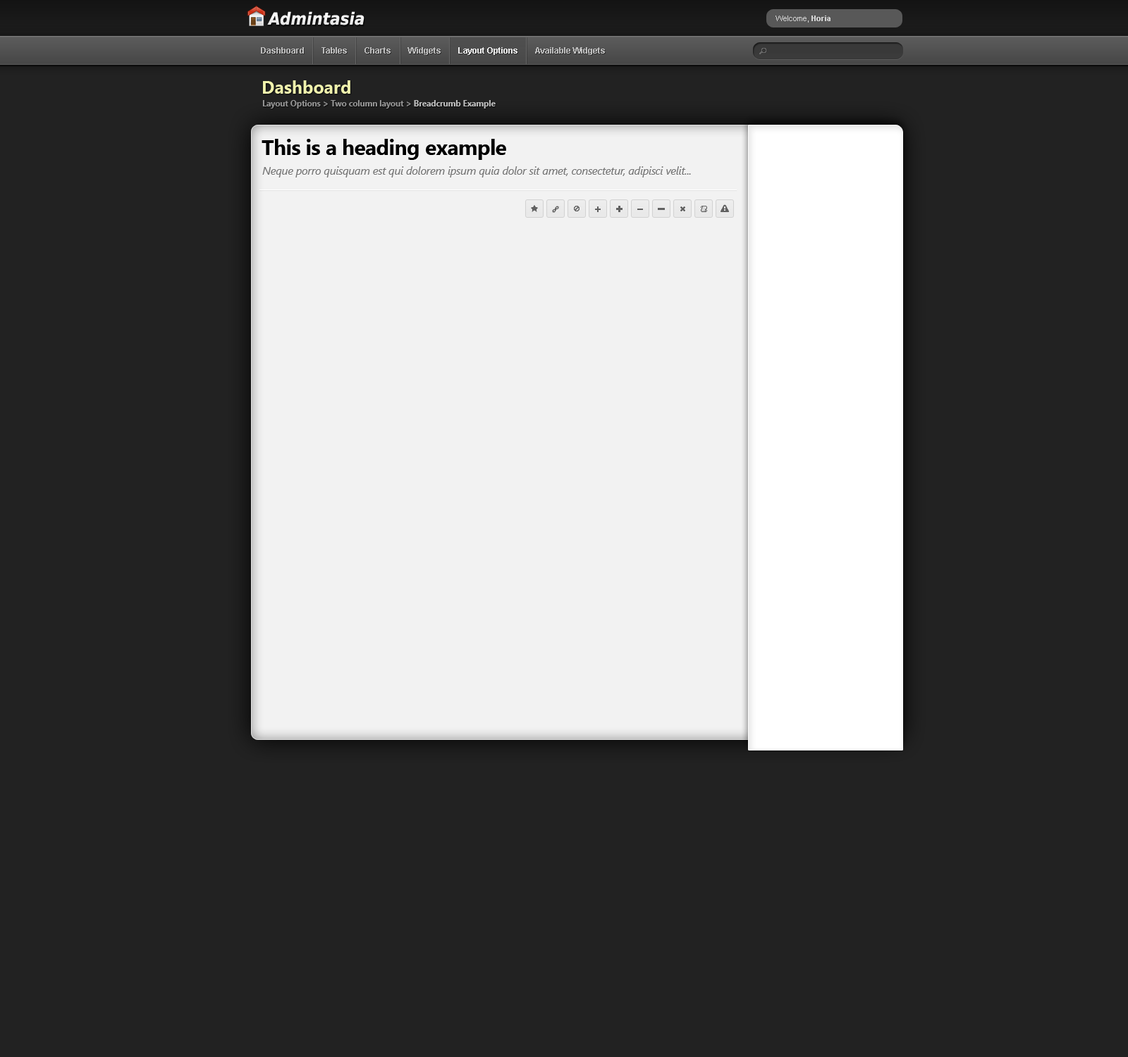
<style>
.page{position:relative;width:1128px;height:1057px;background:#222222}
.page>*{position:absolute;margin:0}
.t1{font:16.9px "DejaVuSansCondensed-BoldOblique";color:#ffffff}
.t2{font:7.8px "ArialMT";color:#d3d3d3}
.t3{font:7.8px "Arial-BoldMT";color:#d3d3d3}
.t4{font:8.5px "Arial-BoldMT";color:#bdbdbd}
.t5{font:8.5px "Arial-BoldMT";color:#ededed}
.t6{font:17.6px "SegoeUI-Bold";color:#f0f2ac}
.t7{font:8.5px "SegoeUI-Bold";letter-spacing:-0.02em;color:#979797}
.t8{font:8.5px "SegoeUI-Bold";letter-spacing:-0.02em;color:#c0c0c0}
.t9{font:21.1px "SegoeUI-Bold";letter-spacing:-0.02em;color:#000000}
.t10{font:11.3px "SegoeUI-Italic";letter-spacing:-0.02em;color:#777777}
</style>
<div class="page">
<p class="t1" style="left:267px;top:11px;width:97px;height:14px">Admintasia</p>
<p class="t2" style="left:775px;top:16px;width:55px;height:7px">Welcome, <span class="t3">Horia</span></p>
<p class="t4" style="left:261px;top:47px;width:344px;height:8px">Dashboard        Tables        Charts        Widgets        <span class="t5">Layout Options        </span>Available Widgets</p>
<p class="t6" style="left:263px;top:80px;width:87px;height:14px">Dashboard</p>
<p class="t7" style="left:262px;top:100px;width:234px;height:9px">Layout Options &gt; Two column layout &gt; <span class="t8">Breadcrumb Example</span></p>
<p class="t9" style="left:262px;top:139px;width:244px;height:21px">This is a heading example</p>
<p class="t10" style="left:262px;top:166px;width:429px;height:12px">Neque porro quisquam est qui dolorem ipsum quia dolor sit amet, consectetur, adipisci velit...</p>
</div>
